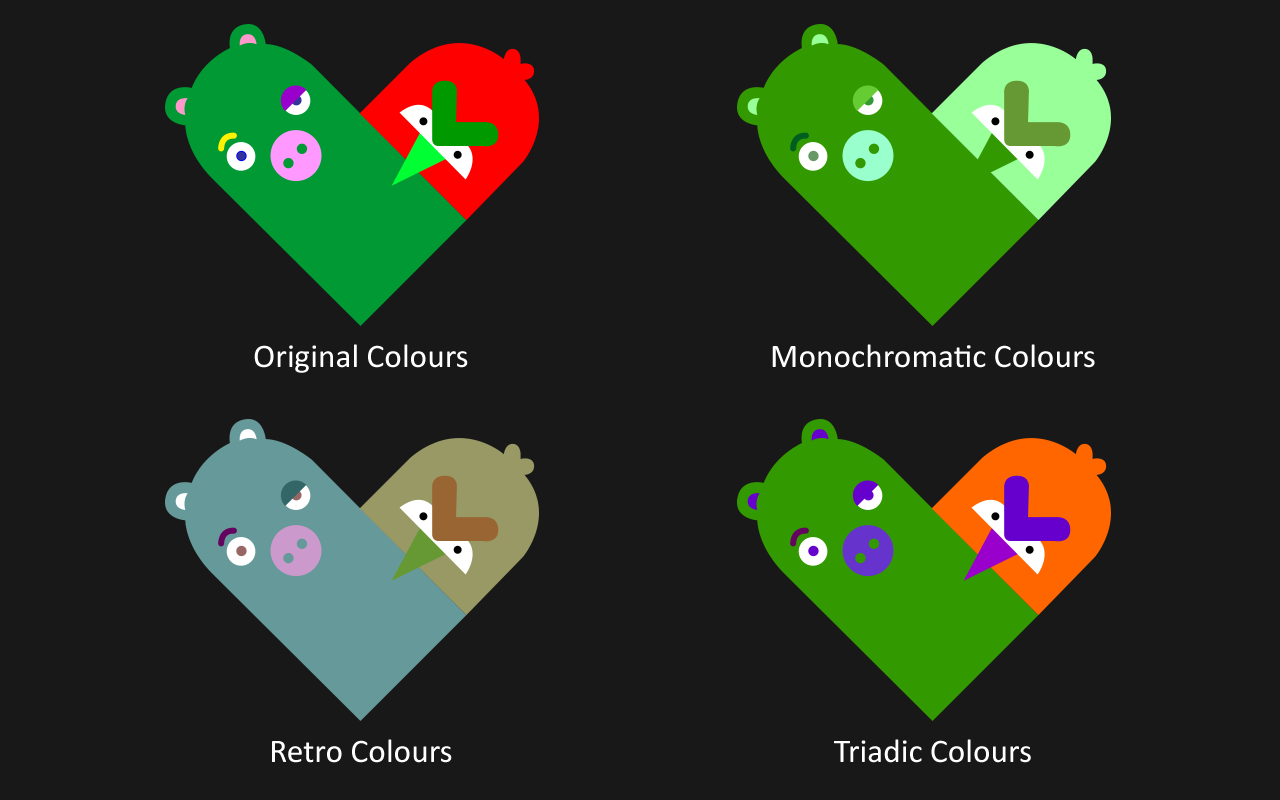
<style>
.page{position:relative;width:1280px;height:800px;background:#181818}
.page>*{position:absolute;margin:0}
.t1{font:33.3px "Calibri";color:#ffffff}
</style>
<div class="page">
<p class="t1" style="left:254px;top:344px;width:214px;height:29px">Original Colours</p>
<p class="t1" style="left:772px;top:344px;width:323px;height:24px">Monochromatic Colours</p>
<p class="t1" style="left:272px;top:739px;width:180px;height:24px">Retro Colours</p>
<p class="t1" style="left:834px;top:739px;width:197px;height:24px">Triadic Colours</p>
</div>
